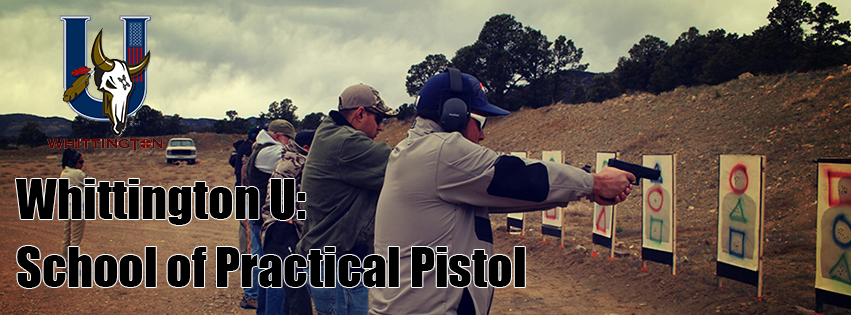
<style>
.page{position:relative;width:851px;height:315px}
.page>*{position:absolute;margin:0}
.t1{font:50px "Impact";color:#000000}
</style>
<div class="page">
<p class="t1" style="left:15px;top:179px;width:291px;height:46px">Whittington U:</p>
<p class="t1" style="left:17px;top:246px;width:508px;height:42px">School of Practical Pistol</p>
</div>
